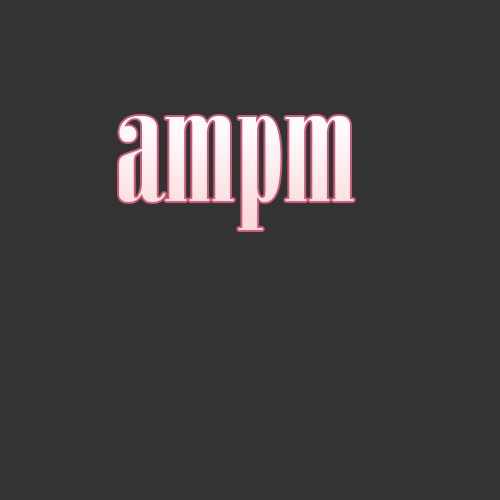
<style>
.page{position:relative;width:500px;height:500px;background:#333333}
.page>*{position:absolute;margin:0}
.t1{font:160px "BodoniMTPosterCompressed";color:#feeff0;scale:1.05 1}
</style>
<div class="page">
<p class="t1" style="left:119px;top:116px;width:235px;height:114px">ampm</p>
</div>
